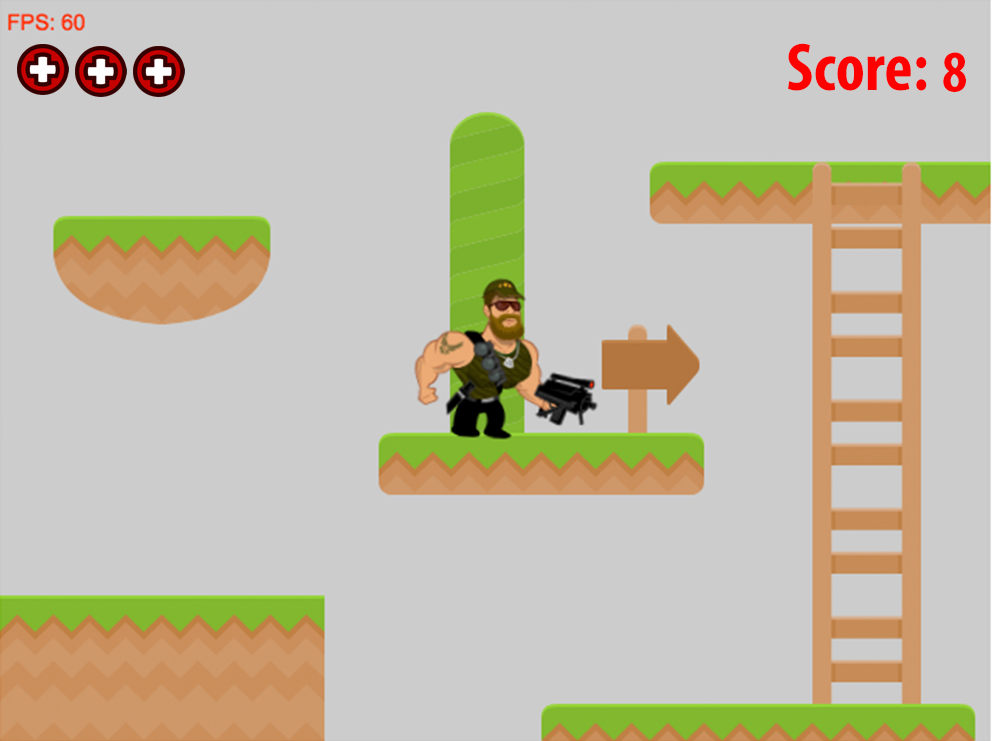
<style>
.page{position:relative;width:992px;height:741px;background:#cccccc}
.page>*{position:absolute;margin:0}
.t1{font:67.8px "MyriadPro-BoldCond";color:#fe0000}
.t2{font:59.1px "MyriadPro-BoldCond";color:#fe0000}
</style>
<div class="page">
<p class="t1" style="left:788px;top:43px;width:139px;height:48px">Score:</p>
<p class="t2" style="left:943px;top:52px;width:23px;height:40px">8</p>
</div>
